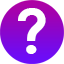
<style>
.page{position:relative;width:64px;height:64px;background:#ffffff}
.page>*{position:absolute;margin:0}
.t1{font:60px "CenturyGothic-Bold";color:#ffffff}
</style>
<div class="page">
<p class="t1" style="left:18px;top:8px;width:28px;height:46px">?</p>
</div>
